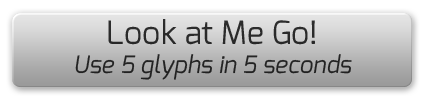
<style>
.page{position:relative;width:425px;height:100px}
.page>*{position:absolute;margin:0}
.t1{font:24px "Exo-Italic";color:#282828}
.t2{font:32px "Exo-Regular";color:#282828}
</style>
<div class="page">
<p class="t1" style="left:75px;top:19px;width:277px;height:61px;text-align:center"><span class="t2">Look at Me Go!<br></span>Use 5 glyphs in 5 seconds</p>
</div>
